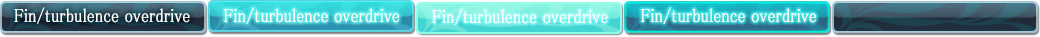
<style>
.page{position:relative;width:1040px;height:37px}
.page>*{position:absolute;margin:0}
.t1{font:19px "MS-PMincho";color:#ffffff;font-weight:bold;scale:0.84 1}
</style>
<div class="page">
<p class="t1" style="left:14px;top:7px;width:176px;height:17px">Fin/turbulence overdrive</p>
<p class="t1" style="left:224px;top:7px;width:175px;height:17px">Fin/turbulence overdrive</p>
<p class="t1" style="left:432px;top:8px;width:176px;height:17px">Fin/turbulence overdrive</p>
<p class="t1" style="left:641px;top:7px;width:175px;height:17px">Fin/turbulence overdrive</p>
</div>
